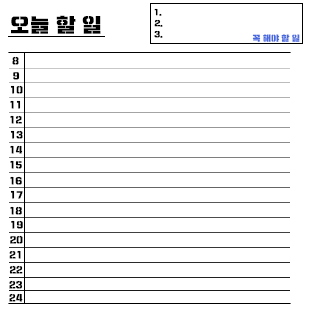
<style>
.page{position:relative;width:310px;height:310px;background:#ffffff}
.page>*{position:absolute;margin:0}
.t1{font:20px "Typo_SsangmunDong_St";color:#000000}
.t2{font:8px "Typo_SsangmunDong_St";color:#000000}
.t3{font:8px "Typo_SsangmunDong_St";color:#4868de}
.t4{font:9px "Typo_SsangmunDong_St";color:#000000}
</style>
<div class="page">
<p class="t1" style="left:11px;top:15px;width:90px;height:19px">오늘 할 일</p>
<p class="t2" style="left:154px;top:8px;width:8px;height:8px">1.</p>
<p class="t2" style="left:154px;top:19px;width:9px;height:8px">2.</p>
<p class="t2" style="left:154px;top:30px;width:9px;height:8px">3.</p>
<p class="t3" style="left:252px;top:34px;width:48px;height:8px">꼭 해야 할 일</p>
<p class="t4" style="left:12px;top:56px;width:7px;height:9px">8</p>
<p class="t4" style="left:13px;top:72px;width:7px;height:8px">9</p>
<p class="t4" style="left:10px;top:85px;width:13px;height:9px">10</p>
<p class="t4" style="left:10px;top:100px;width:11px;height:9px">11</p>
<p class="t4" style="left:10px;top:115px;width:12px;height:9px">12</p>
<p class="t4" style="left:10px;top:130px;width:13px;height:9px">13</p>
<p class="t4" style="left:10px;top:145px;width:13px;height:9px">14</p>
<p class="t4" style="left:10px;top:160px;width:12px;height:9px">15</p>
<p class="t4" style="left:10px;top:176px;width:12px;height:9px">16</p>
<p class="t4" style="left:10px;top:190px;width:13px;height:9px">17</p>
<p class="t4" style="left:10px;top:206px;width:12px;height:9px">18</p>
<p class="t4" style="left:11px;top:220px;width:12px;height:9px">19</p>
<p class="t4" style="left:10px;top:235px;width:13px;height:9px">20’</p>
<p class="t4" style="left:9px;top:250px;width:12px;height:9px">21</p>
<p class="t4" style="left:9px;top:265px;width:14px;height:9px">22</p>
<p class="t4" style="left:9px;top:280px;width:14px;height:9px">23</p>
<p class="t4" style="left:9px;top:293px;width:14px;height:9px">24</p>
</div>
